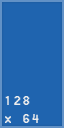
<style>
.page{position:relative;width:64px;height:128px;background:#1f64af}
.page>*{position:absolute;margin:0}
.t1{font:14.7px/18.7px "Fixedsys";color:#ededed}
</style>
<div class="page">
<p class="t1" style="left:5px;top:96px;width:34px;height:27px">128<br>x 64</p>
</div>
